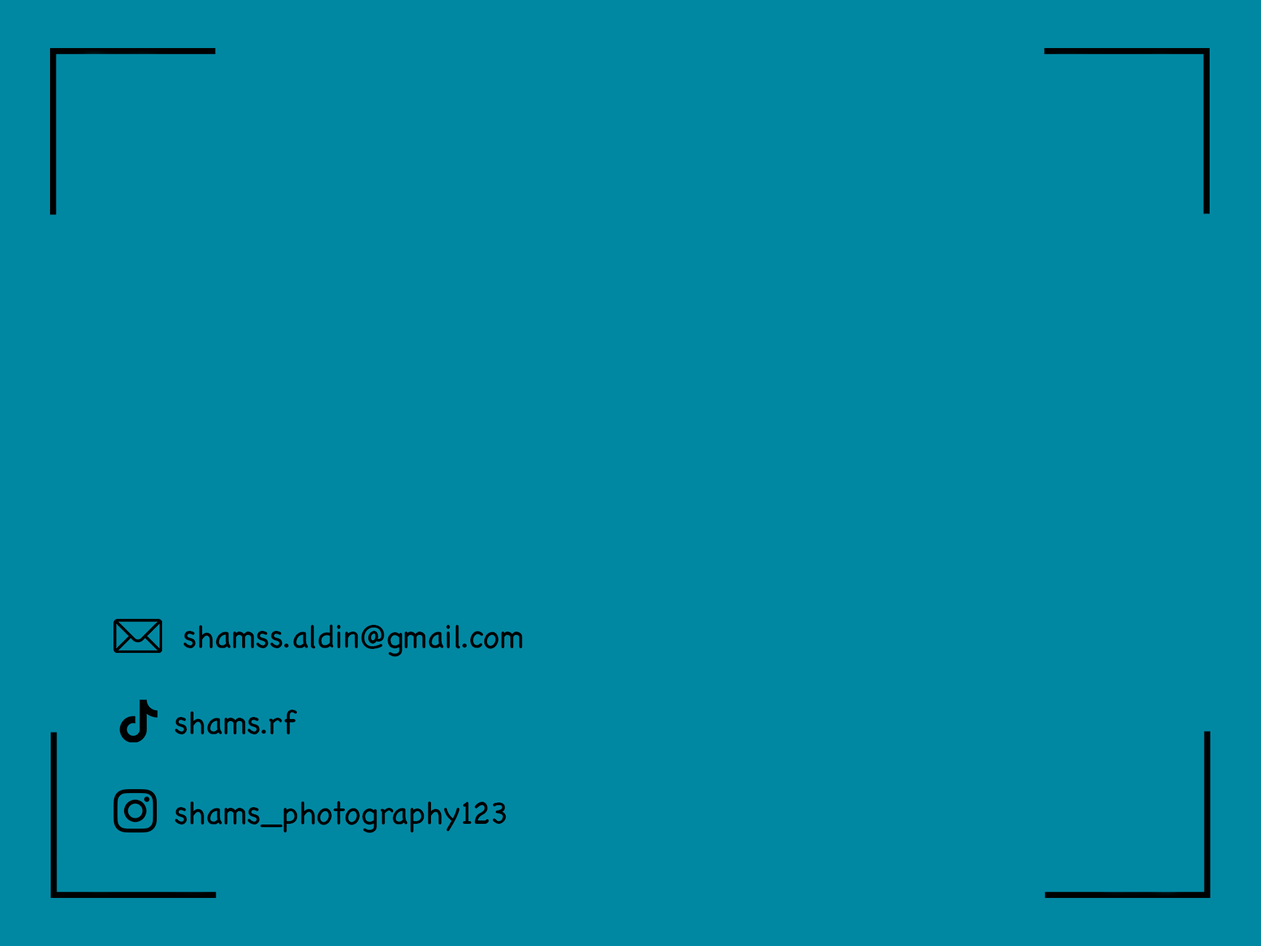
<style>
.page{position:relative;width:1261px;height:946px;background:#0088a3}
.page>*{position:absolute;margin:0}
.t1{font:32.5px "Chalkboard";color:#000101}
</style>
<div class="page">
<p class="t1" style="left:183px;top:624px;width:339px;height:33px">shamss.aldin@gmail.com</p>
<p class="t1" style="left:175px;top:709px;width:122px;height:25px">shams.rf</p>
<p class="t1" style="left:175px;top:801px;width:331px;height:32px">shams_photography123</p>
</div>
